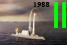
<style>
.page{position:relative;width:67px;height:45px}
.page>*{position:absolute;margin:0}
.t1{font:10.3px "Aparajita-Bold";color:#000000}
</style>
<div class="page">
<p class="t1" style="left:33px;top:2px;width:17px;height:5px">1988</p>
</div>
